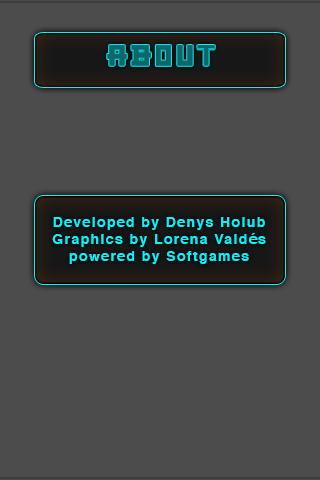
<style>
.page{position:relative;width:320px;height:480px;background:#4c4c4c}
.page>*{position:absolute;margin:0}
.t1{font:14px "Helvetica-Bold";letter-spacing:0.1em;color:#00f6ff}
</style>
<div class="page">
<p class="t1" style="left:52px;top:217px;width:214px;height:47px;text-align:center">Developed by Denys Holub<br>Graphics by Lorena Valdés<br>powered by Softgames</p>
</div>
